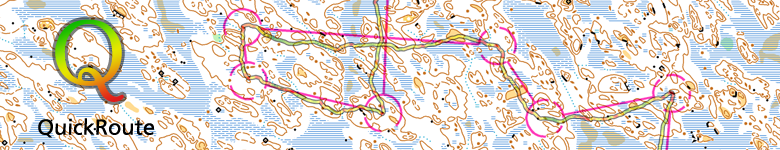
<style>
.page{position:relative;width:780px;height:150px;background:#ffffff}
.page>*{position:absolute;margin:0}
.t1{font:89.7px "PoorRichard-Regular"}
.t2{font:21.7px "FrutigerLinotype-Roman";color:#000000}
</style>
<div class="page">
<p class="t1" style="left:55px;top:19px;width:69px;height:83px">Q</p>
<p class="t2" style="left:38px;top:118px;width:116px;height:20px">QuickRoute</p>
</div>
